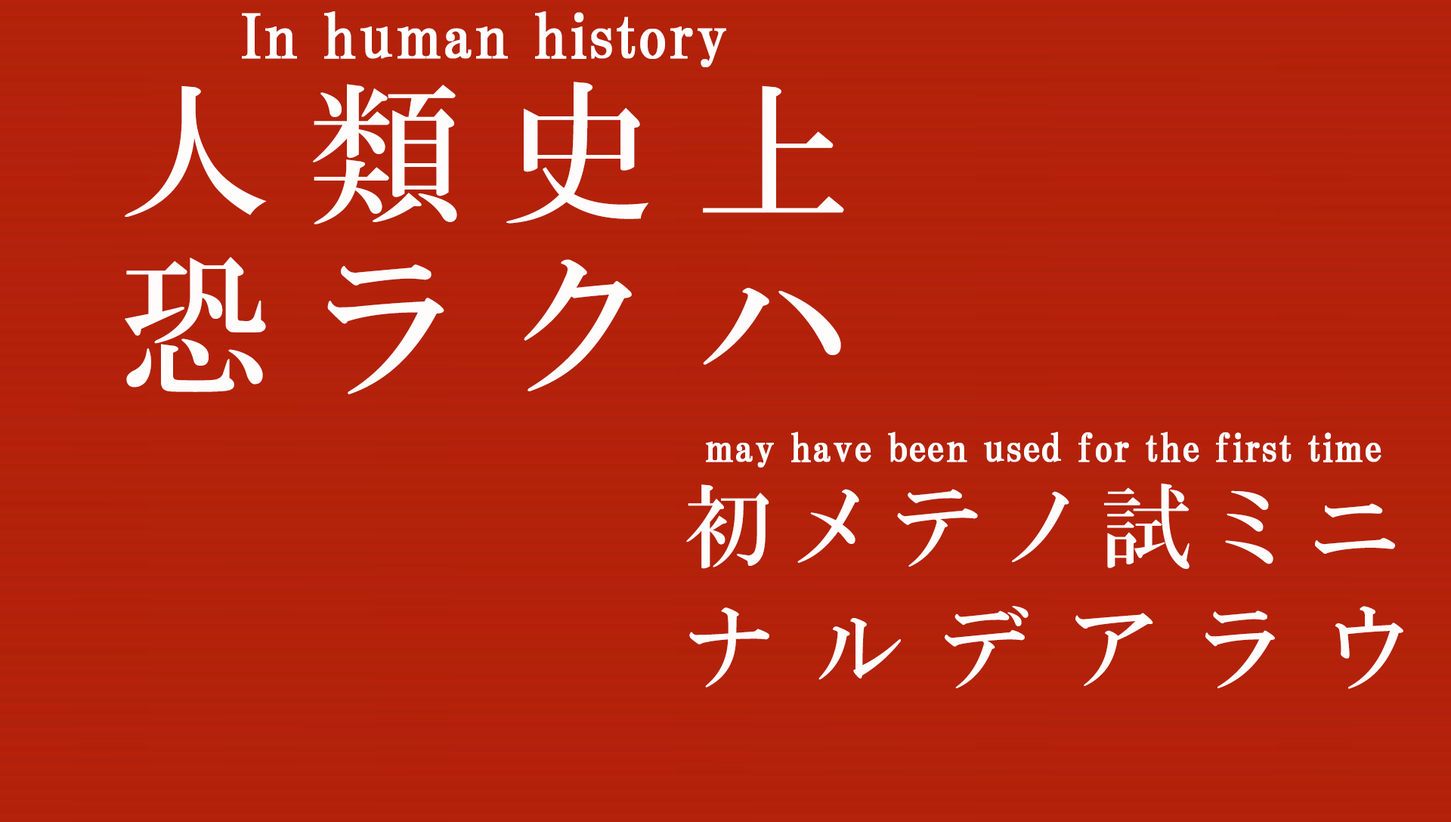
<style>
.page{position:relative;width:1451px;height:822px}
.page>*{position:absolute;margin:0}
.t1{font:60.4px "HGPMinchoB";letter-spacing:0.01em;color:#ffffff;font-weight:bold}
.t2{font:151.9px/174.5px "HGMinchoB";letter-spacing:0.27em;color:#fffcfc}
.t3{font:38.3px "HGPMinchoB";letter-spacing:0.01em;color:#ffffff;font-weight:bold}
.t4{font:90.7px/121.6px "HGMinchoB";letter-spacing:0.15em;color:#fffcfc}
.t5{font:90.7px/121.6px "HGMinchoB";letter-spacing:0.41em;color:#fffcfc}
</style>
<div class="page">
<p class="t1" style="left:242px;top:11px;width:484px;height:56px">In human history</p>
<p class="t2" style="left:125px;top:82px;width:719px;height:312px">人類史上<br>恐ラクハ</p>
<p class="t3" style="left:706px;top:431px;width:675px;height:37px">may have been used for the first time</p>
<p class="t4" style="left:686px;top:484px;width:717px;height:205px">初メテノ試ミニ<br><span class="t5">ナルデアラウ</span></p>
</div>
